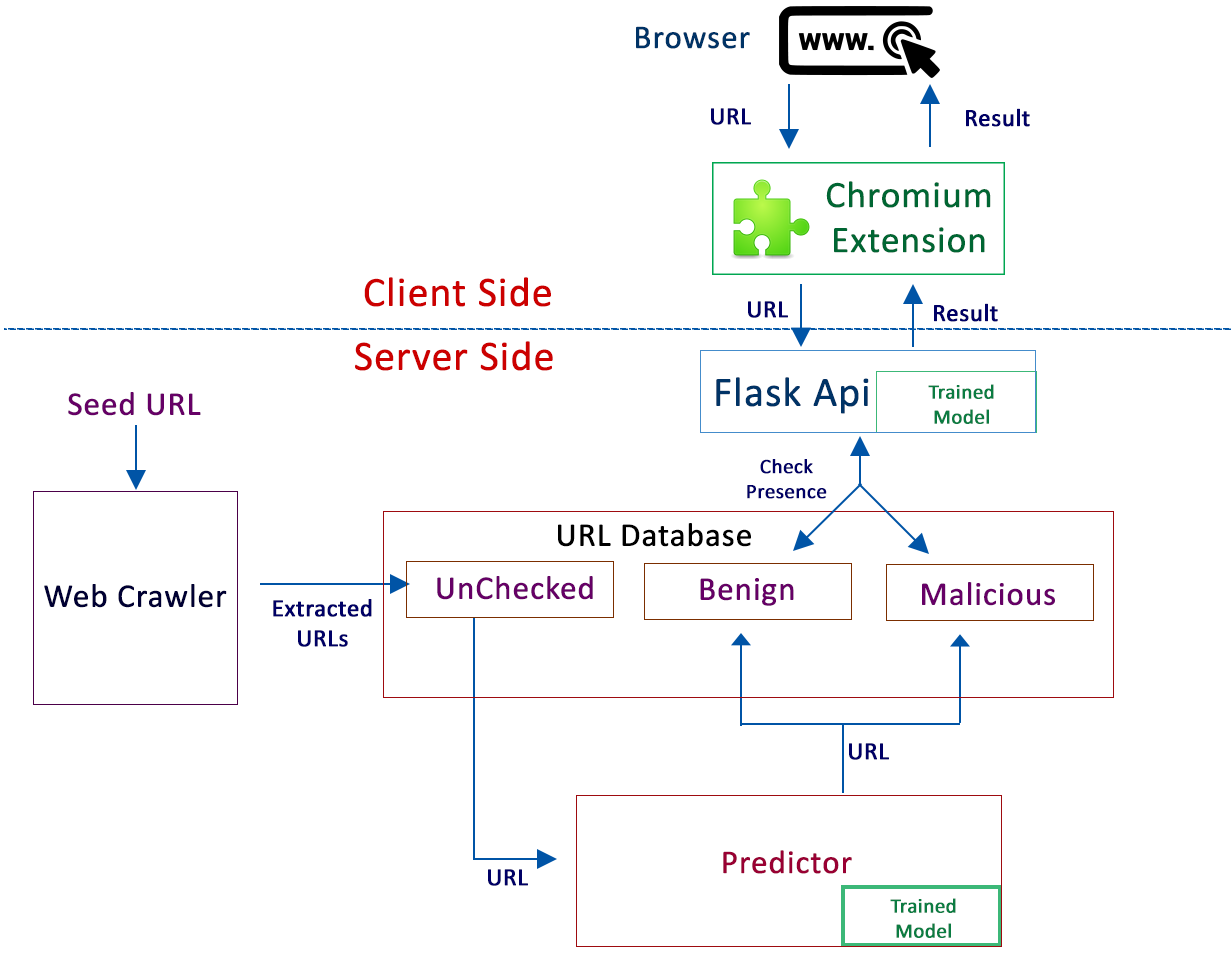
<style>
.page{position:relative;width:1231px;height:955px;background:#ffffff}
.page>*{position:absolute;margin:0}
.t1{font:33.3px "Calibri";color:#003366;font-weight:bold}
.t2{font:25px "Calibri";color:#000066;font-weight:bold}
.t3{font:37.5px "Calibri";color:#006633;font-weight:bold}
.t4{font:41.7px "Calibri";color:#cc0000;font-weight:bold}
.t5{font:41.7px "Calibri";color:#003366;font-weight:bold}
.t6{font:20.8px "Calibri";color:#0b7c42;font-weight:bold}
.t7{font:33.3px "Calibri";color:#660066;font-weight:bold}
.t8{font:20.8px "Calibri";color:#000066;font-weight:bold}
.t9{font:33.3px "Calibri";color:#000000;font-weight:bold}
.t10{font:33.3px "Calibri";color:#000033;font-weight:bold}
.t11{font:33.3px "Calibri";color:#990033;font-weight:bold}
</style>
<div class="page">
<p class="t1" style="left:636px;top:26px;width:114px;height:23px">Browser</p>
<p class="t2" style="left:711px;top:108px;width:40px;height:17px">URL</p>
<p class="t2" style="left:966px;top:108px;width:64px;height:19px">Result</p>
<p class="t3" style="left:826px;top:181px;width:165px;height:72px;text-align:center">Chromium Extension</p>
<p class="t4" style="left:364px;top:277px;width:187px;height:30px">Client Side</p>
<p class="t2" style="left:748px;top:301px;width:40px;height:17px">URL</p>
<p class="t2" style="left:934px;top:303px;width:64px;height:19px">Result</p>
<p class="t4" style="left:355px;top:341px;width:198px;height:30px">Server Side</p>
<p class="t5" style="left:716px;top:377px;width:153px;height:37px">Flask Api</p>
<p class="t6" style="left:928px;top:384px;width:66px;height:40px;text-align:center">Trained<br>Model</p>
<p class="t7" style="left:68px;top:392px;width:133px;height:24px">Seed URL</p>
<p class="t8" style="left:747px;top:459px;width:80px;height:40px;text-align:center">Check<br>Presence</p>
<p class="t9" style="left:558px;top:523px;width:193px;height:24px">URL Database</p>
<p class="t7" style="left:437px;top:576px;width:156px;height:24px">UnChecked</p>
<p class="t7" style="left:700px;top:578px;width:94px;height:28px">Benign</p>
<p class="t7" style="left:922px;top:582px;width:133px;height:24px">Malicious</p>
<p class="t10" style="left:44px;top:584px;width:183px;height:24px">Web Crawler</p>
<p class="t2" style="left:273px;top:599px;width:99px;height:48px;text-align:center">Extracted<br>URLs</p>
<p class="t2" style="left:849px;top:743px;width:40px;height:17px">URL</p>
<p class="t11" style="left:723px;top:850px;width:129px;height:24px">Predictor</p>
<p class="t2" style="left:488px;top:869px;width:40px;height:17px">URL</p>
<p class="t6" style="left:890px;top:898px;width:66px;height:40px;text-align:center">Trained<br>Model</p>
</div>
